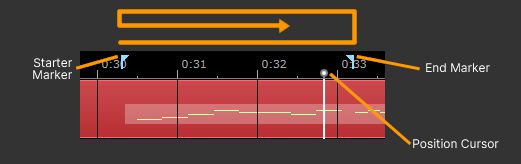
<style>
.page{position:relative;width:521px;height:164px;background:#333333}
.page>*{position:absolute;margin:0}
.t1{font:12px/12px "Sarasa-Gothic-SC-Regular";color:#ffffff}
.t2{font:12px "Sarasa-Gothic-SC-Regular";color:#ffffff}
</style>
<div class="page">
<p class="t1" style="left:33px;top:58px;width:39px;height:22px;text-align:right">Starter<br>Marker</p>
<p class="t2" style="left:426px;top:63px;width:64px;height:10px">End Marker</p>
<p class="t2" style="left:413px;top:138px;width:86px;height:11px">Position Cursor</p>
</div>
